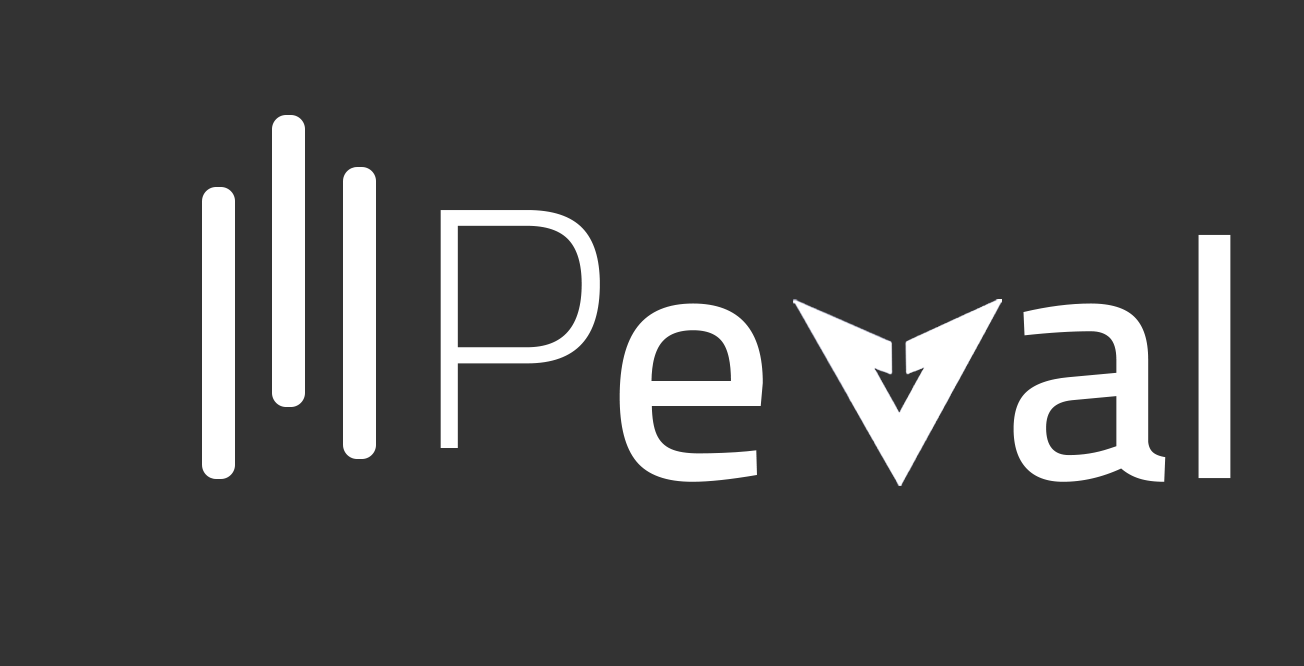
<style>
.page{position:relative;width:1304px;height:666px;background:#333333}
.page>*{position:absolute;margin:0}
.t1{font:341.4px "Cairo-Light";color:#ffffff}
.t2{font:341.4px "Cairo-SemiBold";color:#ffffff}
</style>
<div class="page">
<p class="t1" style="left:440px;top:210px;width:160px;height:238px">P</p>
<p class="t2" style="left:619px;top:234px;width:612px;height:248px">e   al</p>
</div>
